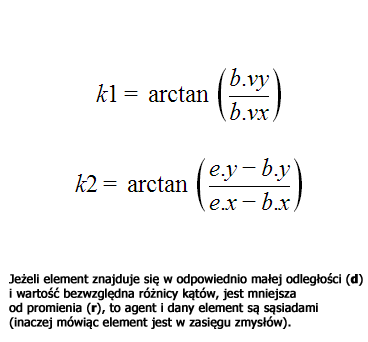
<style>
.page{position:relative;width:368px;height:342px;background:#ffffff}
.page>*{position:absolute;margin:0}
.t1{font:12px "Tahoma";color:#010101;font-weight:bold}
.t2{font:12px "Tahoma-Bold";color:#010101;font-weight:bold}
</style>
<div class="page">
<p class="t1" style="left:9px;top:273px;width:354px;height:56px">Jeżeli element znajduje się w odpowiednio małej odległości (<span class="t2">d</span>)<br>i wartość bezwzględna różnicy kątów, jest mniejsza <br>od promienia (<span class="t2">r</span>), to agent i dany element są sąsiadami <br>(inaczej mówiąc element jest w zasięgu zmysłów).</p>
</div>
